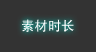
<style>
.page{position:relative;width:96px;height:52px;background:#333333}
.page>*{position:absolute;margin:0}
.t1{font:13.3px "AdobeHeitiStd-Regular";color:#ffffff}
</style>
<div class="page">
<p class="t1" style="left:22px;top:19px;width:52px;height:13px">素材时长</p>
</div>
